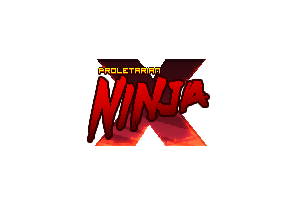
<style>
.page{position:relative;width:300px;height:200px;background:#ffffff}
.page>*{position:absolute;margin:0}
.t1{font:130.8px "Bauhaus93";scale:1.53 1}
.t2{font:68.8px "DeathRattleBB"}
.t3{font:10px "VisitorTT1BRK"}
</style>
<div class="page">
<p class="t1" style="left:95px;top:59px;width:112px;height:87px">X</p>
<p class="t2" style="left:89px;top:76px;width:119px;height:65px;rotate:-7deg">Ninja</p>
<p class="t3" style="left:99px;top:69px;width:61px;height:5px">Proletarian</p>
<p class="t3" style="left:99px;top:68px;width:61px;height:5px">Proletarian</p>
</div>
